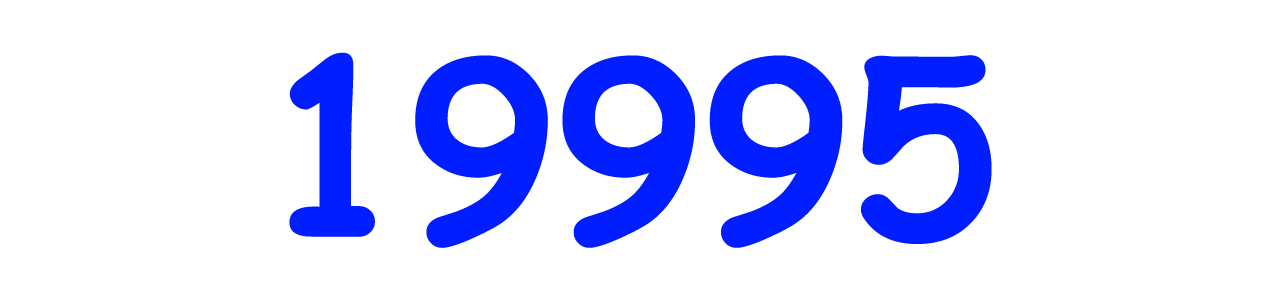
<style>
.page{position:relative;width:1280px;height:300px;background:#ffffff}
.page>*{position:absolute;margin:0}
.t1{font:241.3px "ComicSansMS-Bold";color:#001eff}
</style>
<div class="page">
<p class="t1" style="left:289px;top:52px;width:703px;height:196px">19995</p>
</div>
